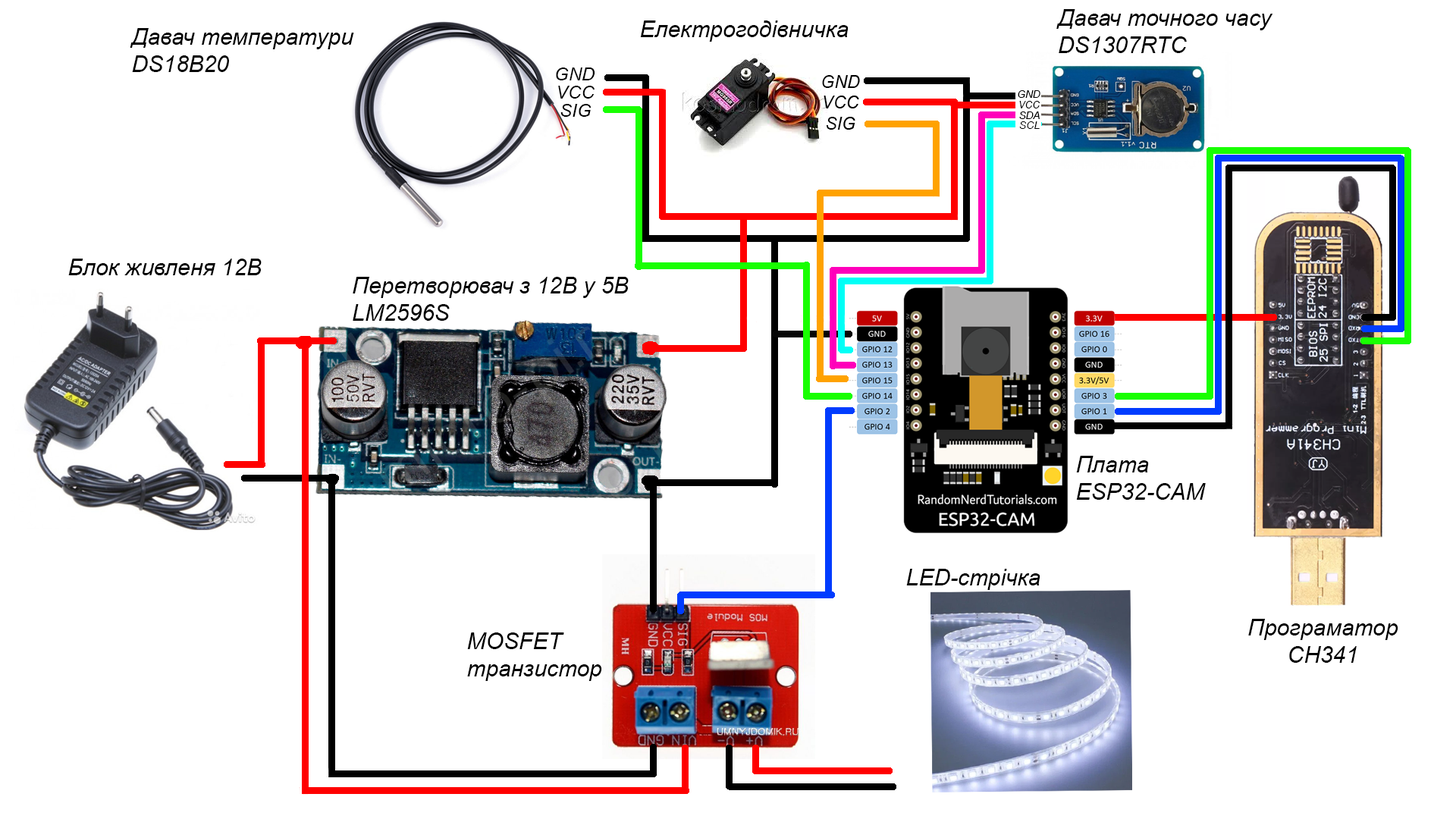
<style>
.page{position:relative;width:1456px;height:819px;background:#ffffff}
.page>*{position:absolute;margin:0}
.t1{font:22.7px "Arial-ItalicMT";color:#000000}
.t2{font:18.2px "Arial-ItalicMT";color:#000000}
.t3{font:10.4px "Arial-ItalicMT";color:#000000}
.t4{font:10.2px "Arial-ItalicMT";color:#000000}
.t5{font:10.8px "Arial-ItalicMT";color:#000000}
</style>
<div class="page">
<p class="t1" style="left:1056px;top:9px;width:217px;height:44px;text-align:justify">Давач точного часу<br>DS1307RTC</p>
<p class="t1" style="left:130px;top:28px;width:224px;height:44px;text-align:justify">Давач температури<br>DS18B20</p>
<p class="t1" style="left:640px;top:20px;width:209px;height:22px">Електрогодівничка</p>
<p class="t2" style="left:556px;top:67px;width:39px;height:13px">GND</p>
<p class="t2" style="left:558px;top:86px;width:37px;height:13px">VCC</p>
<p class="t3" style="left:1018px;top:90px;width:22px;height:8px">GND</p>
<p class="t4" style="left:1019px;top:101px;width:21px;height:7px">VCC</p>
<p class="t2" style="left:560px;top:104px;width:31px;height:13px">SIG</p>
<p class="t4" style="left:1019px;top:111px;width:21px;height:8px">SDA</p>
<p class="t5" style="left:1019px;top:121px;width:21px;height:8px">SCL</p>
<p class="t1" style="left:68px;top:259px;width:194px;height:16px">Блок живленя 12В</p>
<p class="t1" style="left:353px;top:277px;width:276px;height:44px;text-align:justify">Перетворювач з 12В у 5В<br>LM2596S</p>
<p class="t1" style="left:1076px;top:456px;width:130px;height:44px;text-align:justify">Плата<br>ESP32-CAM</p>
<p class="t1" style="left:906px;top:569px;width:134px;height:21px">LED-стрічка</p>
<p class="t1" style="left:1248px;top:619px;width:150px;height:44px;text-align:center">Програматор<br>CH341</p>
<p class="t1" style="left:467px;top:632px;width:135px;height:49px;text-align:justify">MOSFET <br>транзистор</p>
</div>
